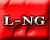
<style>
.page{position:relative;width:50px;height:40px}
.page>*{position:absolute;margin:0}
.t1{font:11.2px "MyungjoXB-HM";scale:1.53 1}
</style>
<div class="page">
<p class="t1" style="left:4px;top:16px;width:42px;height:9px">L-NG</p>
</div>
